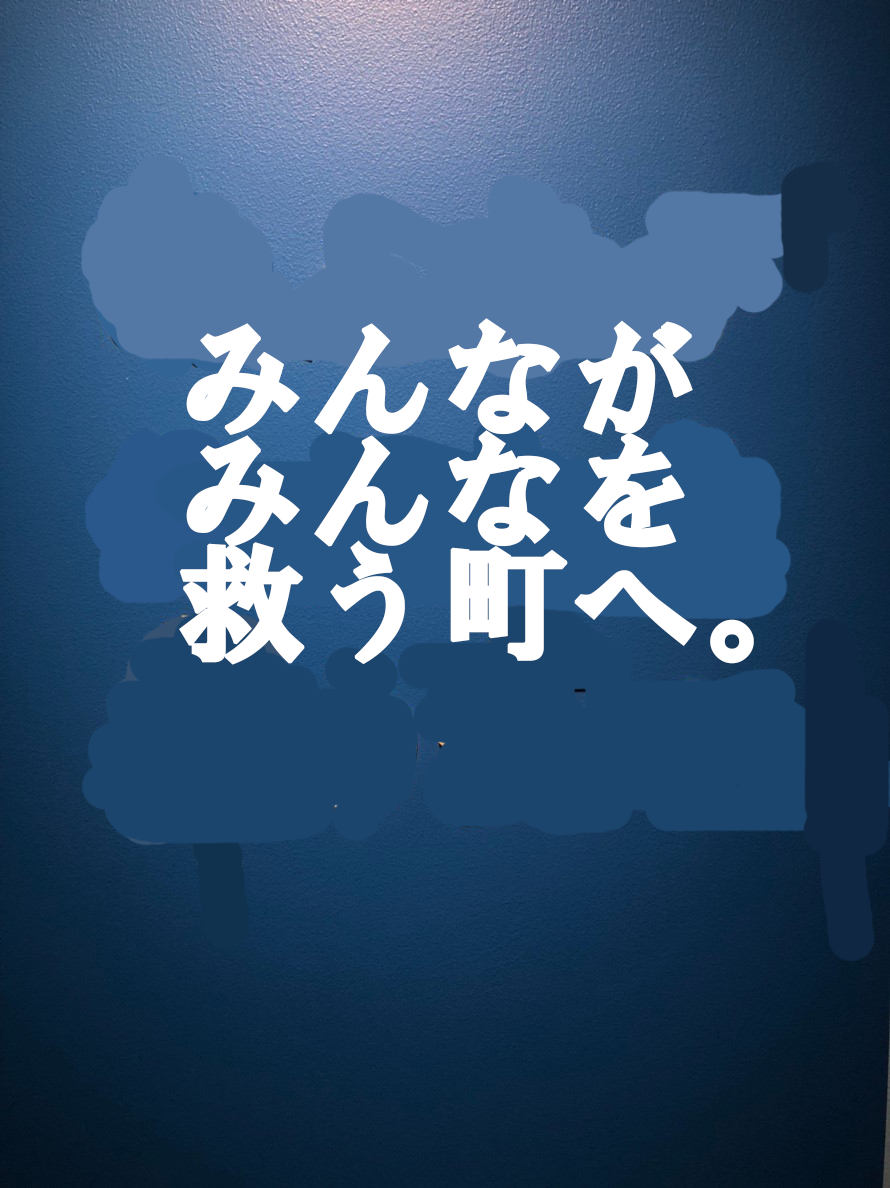
<style>
.page{position:relative;width:890px;height:1188px}
.page>*{position:absolute;margin:0}
.t1{font:128px "HGSSoeiPresenceEB";color:#ffffff;font-weight:bold}
</style>
<div class="page">
<p class="t1" style="left:179px;top:318px;width:575px;height:347px">みんなが<br>みんなを<br>救う町へ。</p>
</div>
